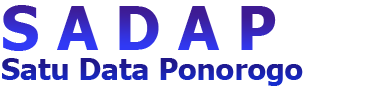
<style>
.page{position:relative;width:370px;height:86px;background:#ffffff}
.page>*{position:absolute;margin:0}
.t1{font:60px "Tahoma-Bold"}
.t2{font:30px "Tahoma-Bold"}
</style>
<div class="page">
<p class="t1" style="left:3px;top:5px;width:273px;height:46px">S A D A P</p>
<p class="t2" style="left:2px;top:58px;width:301px;height:28px">Satu Data Ponorogo</p>
</div>
